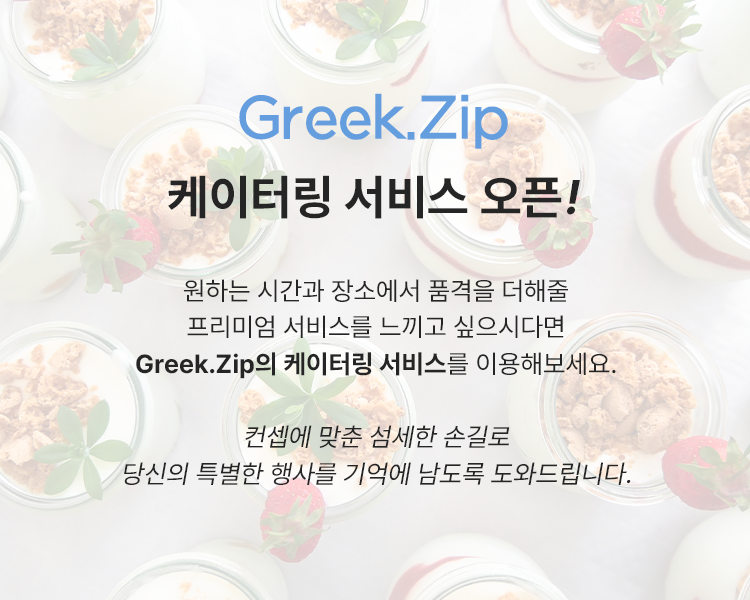
<style>
.page{position:relative;width:750px;height:600px}
.page>*{position:absolute;margin:0}
.t1{font:48px/79px "Pretendard-Bold";color:#252525}
.t2{font:56px/79px "KDB_GothicB_Pro";color:#659ede}
.t3{font:48px/79px "Pretendard-Bold";color:#252525;font-style:italic}
.t4{font:26px/36.7px "Pretendard-Regular";color:#252525;font-style:italic}
.t5{font:26px/36.7px "Pretendard-Regular";color:#252525}
.t6{font:26px/36.7px "Pretendard-Bold";color:#252525}
</style>
<div class="page">
<p class="t1" style="left:168px;top:93px;width:412px;height:126px;text-align:center"><span class="t2">Greek.Zip<br></span>케이터링 서비스 오픈<span class="t3">!</span></p>
<p class="t4" style="left:124px;top:279px;width:507px;height:206px;text-align:center"><span class="t5">원하는 시간과 장소에서 품격을 더해줄<br>프리미엄 서비스를 느끼고 싶으시다면<br></span><span class="t6">Greek.Zip의 케이터링 서비스</span><span class="t5">를 이용해보세요.<br><br></span>컨셉에 맞춘 섬세한 손길로<br>당신의 특별한 행사를 기억에 남도록 도와드립니다.</p>
</div>
